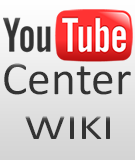
<style>
.page{position:relative;width:135px;height:160px}
.page>*{position:absolute;margin:0}
.t1{font:47.6px "Calibri";color:#333333}
.t2{font:35.6px "Calibri";color:#333333;scale:1.32 1}
</style>
<div class="page">
<p class="t1" style="left:4px;top:63px;width:127px;height:32px">Center</p>
<p class="t2" style="left:25px;top:116px;width:85px;height:23px">WIKI</p>
</div>
